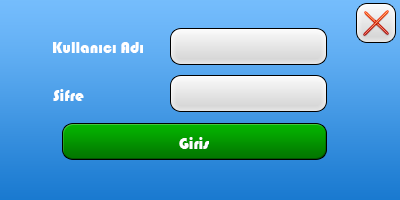
<style>
.page{position:relative;width:400px;height:200px}
.page>*{position:absolute;margin:0}
.t1{font:16px "Bauhaus93";color:#ffffff}
</style>
<div class="page">
<p class="t1" style="left:53px;top:42px;width:90px;height:11px">Kullanıcı Adı</p>
<p class="t1" style="left:53px;top:89px;width:31px;height:12px">Sifre</p>
<p class="t1" style="left:179px;top:137px;width:30px;height:12px">Giris</p>
</div>
